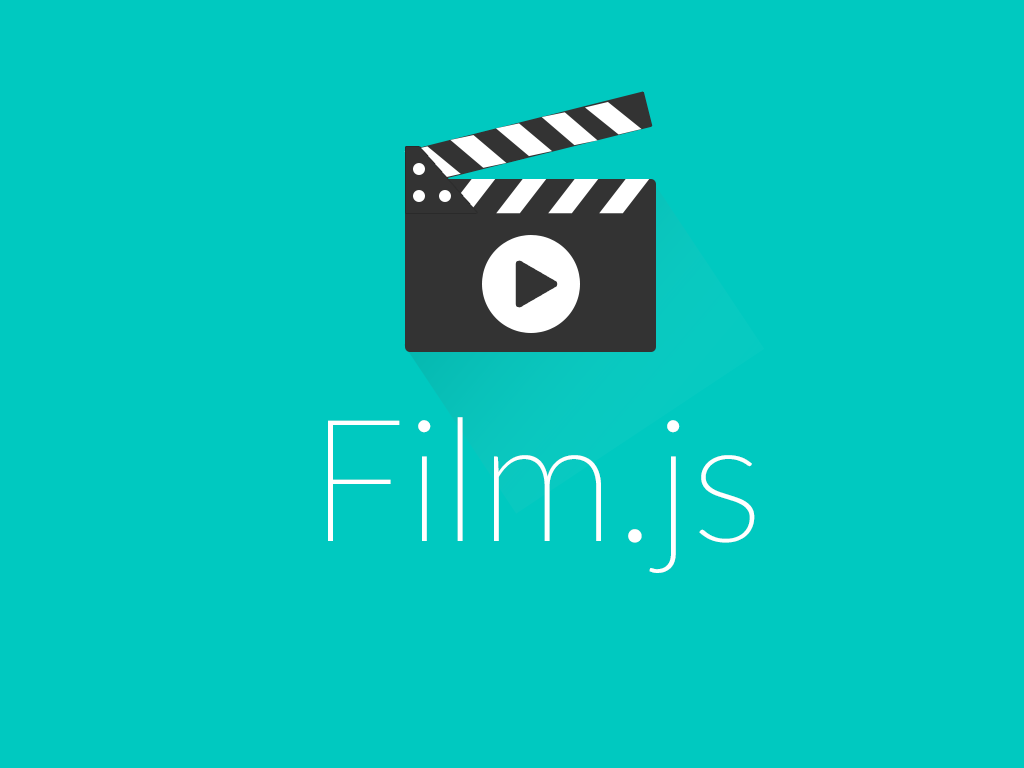
<style>
.page{position:relative;width:1024px;height:768px;background:#00c9c0}
.page>*{position:absolute;margin:0}
.t1{font:171px "Lato-Thin";color:#ffffff}
</style>
<div class="page">
<p class="t1" style="left:328px;top:417px;width:427px;height:156px">Film.js</p>
</div>
